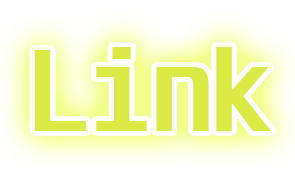
<style>
.page{position:relative;width:295px;height:177px;background:#ffffff}
.page>*{position:absolute;margin:0}
.t1{font:100px "Unispace-Bold";color:#dcea45}
</style>
<div class="page">
<p class="t1" style="left:34px;top:47px;width:237px;height:84px">Link</p>
</div>
